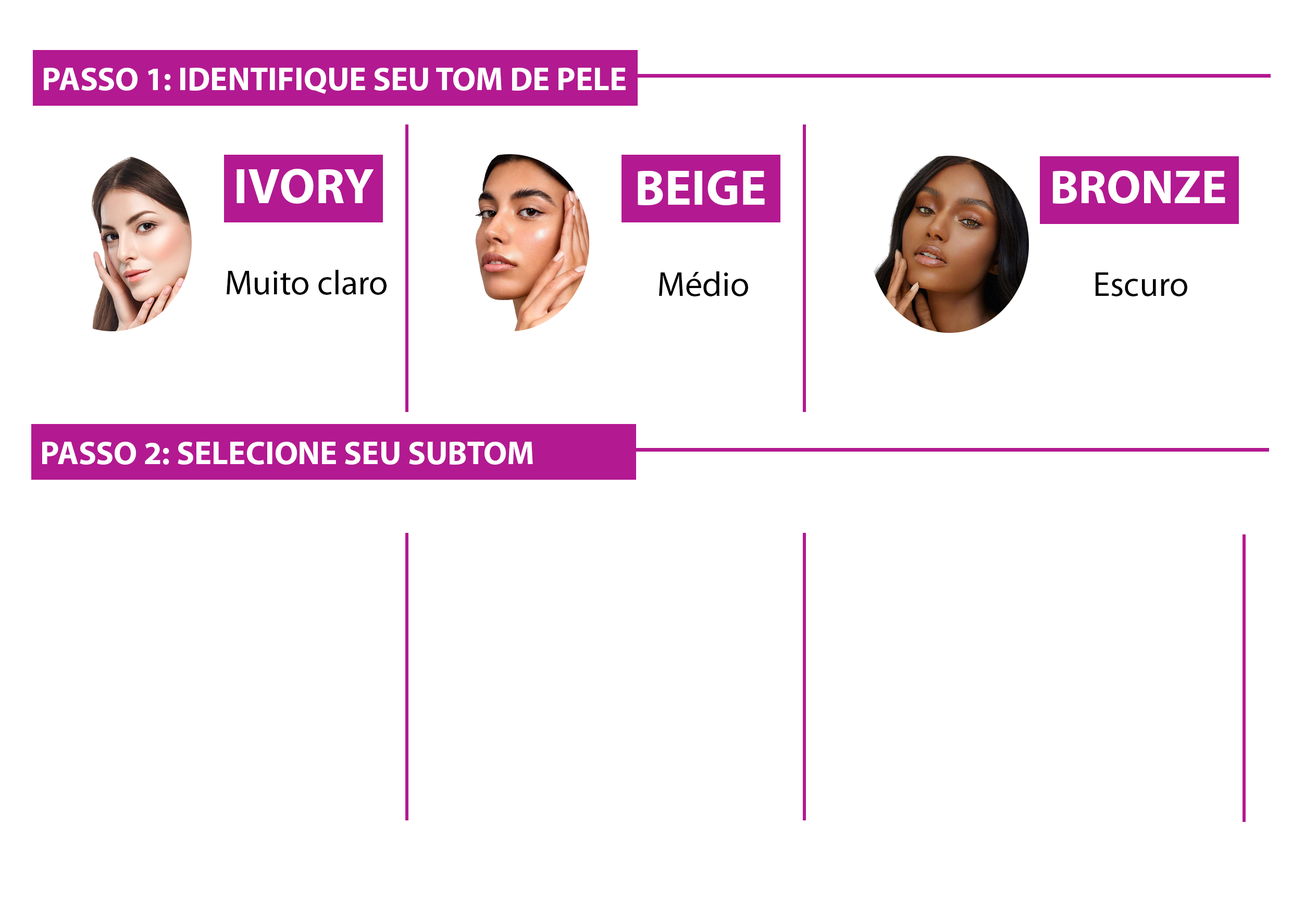
<style>
.page{position:relative;width:1292px;height:923px;background:#ffffff}
.page>*{position:absolute;margin:0}
.t1{font:32.6px "MyriadPro-Bold";color:#ffffff}
.t2{font:49.9px "MyriadPro-Bold";color:#ffffff}
.t3{font:47.7px "MyriadPro-Bold";color:#ffffff}
.t4{font:34.7px "MyriadPro-Regular";color:#010101}
</style>
<div class="page">
<p class="t1" style="left:44px;top:68px;width:582px;height:26px">PASSO 1: IDENTIFIQUE SEU TOM DE PELE</p>
<p class="t2" style="left:236px;top:169px;width:138px;height:35px">IVORY</p>
<p class="t2" style="left:638px;top:170px;width:127px;height:35px">BEIGE</p>
<p class="t3" style="left:1053px;top:170px;width:172px;height:34px">BRONZE</p>
<p class="t4" style="left:227px;top:270px;width:160px;height:25px">Muito claro</p>
<p class="t4" style="left:659px;top:271px;width:89px;height:25px">Médio</p>
<p class="t4" style="left:1095px;top:272px;width:92px;height:24px">Escuro</p>
<p class="t1" style="left:42px;top:442px;width:491px;height:23px">PASSO 2: SELECIONE SEU SUBTOM</p>
</div>
